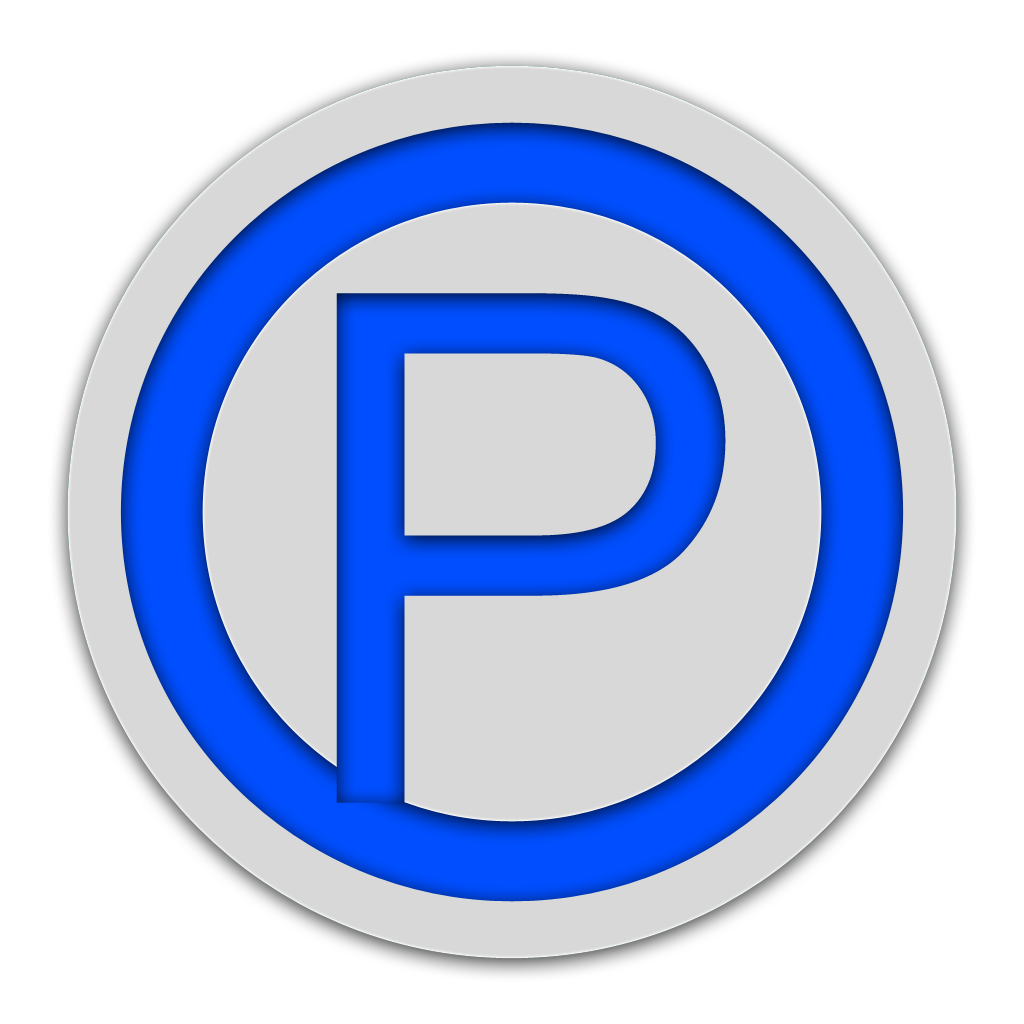
<style>
.page{position:relative;width:1024px;height:1024px;background:#ffffff}
.page>*{position:absolute;margin:0}
.t1{font:711.1px "ArialMT"}
</style>
<div class="page">
<p class="t1" style="left:336px;top:293px;width:390px;height:510px">P</p>
</div>
